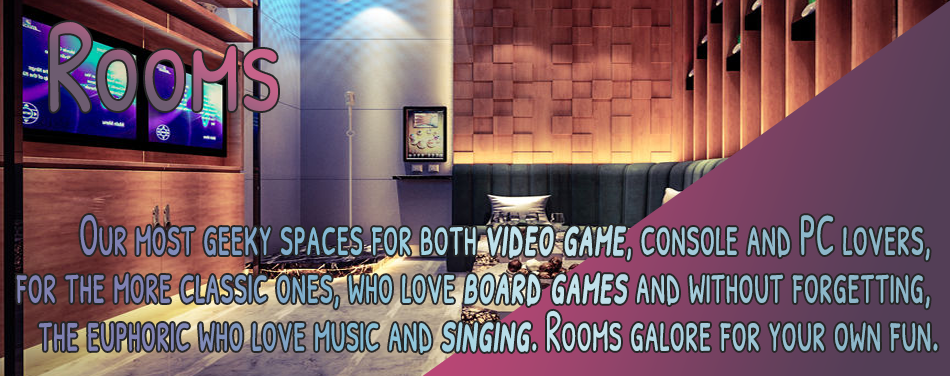
<style>
.page{position:relative;width:950px;height:376px}
.page>*{position:absolute;margin:0}
.t1{font:133.6px "PatrickHandSC-Regular";scale:0.79 1}
.t2{font:59.9px/47.9px "PatrickHandSC-Regular";scale:0.57 1}
.t3{font:59.9px/47.9px "PatrickHandSC-Regular";font-weight:bold;font-style:italic;scale:0.57 1}
</style>
<div class="page">
<p class="t1" style="left:49px;top:22px;width:229px;height:90px">Rooms</p>
<p class="t2" style="left:16px;top:215px;width:922px;height:138px;text-align:right">Our most geeky spaces for both <span class="t3">video game</span>, console and PC lovers, <br>for the more classic ones, who love <span class="t3">board games</span> and without forgetting, <br>the euphoric who love music and <span class="t3">singing</span>. Rooms galore for your own fun.</p>
</div>
